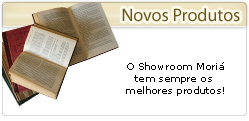
<style>
.page{position:relative;width:249px;height:121px;background:#ffffff}
.page>*{position:absolute;margin:0}
.t1{font:18px "MyriadPro-Regular";color:#685518}
.t2{font:10px "Verdana";color:#000000}
</style>
<div class="page">
<p class="t1" style="left:122px;top:8px;width:118px;height:14px">Novos Produtos</p>
<p class="t2" style="left:126px;top:62px;width:98px;height:34px;text-align:center">O Showroom Moriá<br>tem sempre os <br>melhores produtos!</p>
</div>
